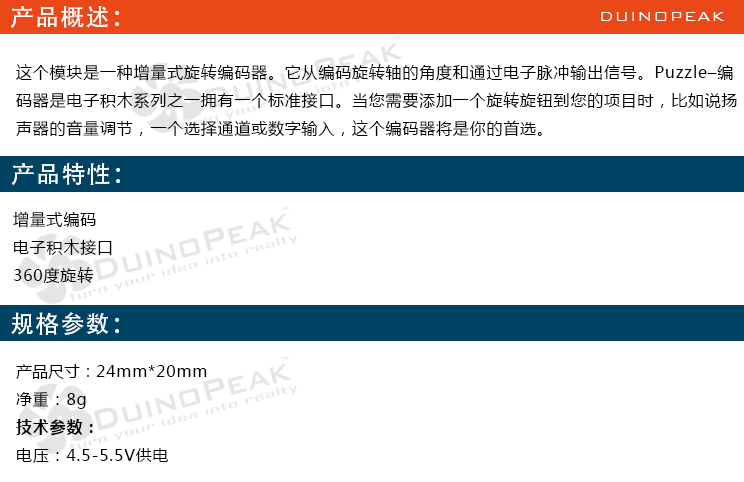
<style>
.page{position:relative;width:744px;height:482px;background:#ffffff}
.page>*{position:absolute;margin:0}
.t1{font:24px "AdobeHeitiStd-Regular";letter-spacing:0.05em;color:#ffffff}
.t2{font:18px "BankGothicBT-Light";letter-spacing:0.05em;color:#ffffff}
.t3{font:16px "MicrosoftYaHei";letter-spacing:0.05em;color:#000000}
.t4{font:16px "MicrosoftYaHei";color:#000000}
.t5{font:16px "MicrosoftYaHei-Bold";letter-spacing:0.05em;color:#000000}
</style>
<div class="page">
<p class="t1" style="left:10px;top:6px;width:109px;height:23px">产品概述：</p>
<p class="t2" style="left:601px;top:12px;width:124px;height:9px">DUINOPEAK</p>
<p class="t3" style="left:16px;top:64px;width:721px;height:73px">这个模块是一种增量式旋转编码器。它从编码旋转轴的角度和通过电子脉冲输出信号。Puzzle–编<br>码器是电子积木系列之一拥有一个标准接口。当您需要添加一个旋转旋钮到您的项目时，比如说扬<br>声器的音量调节，一个选择通道或数字输入，这个编码器将是你的首选。</p>
<p class="t1" style="left:11px;top:162px;width:109px;height:24px">产品特性：</p>
<p class="t3" style="left:13px;top:211px;width:99px;height:73px">增量式编码<br>电子积木接口<br>360度旋转</p>
<p class="t1" style="left:11px;top:312px;width:108px;height:23px">规格参数：</p>
<p class="t3" style="left:16px;top:364px;width:191px;height:99px"><span class="t4">产品尺寸：</span>24mm*20mm<br>净重：8g<br><span class="t5">技术参数：<br></span>电压：4.5-5.5V供电</p>
</div>
